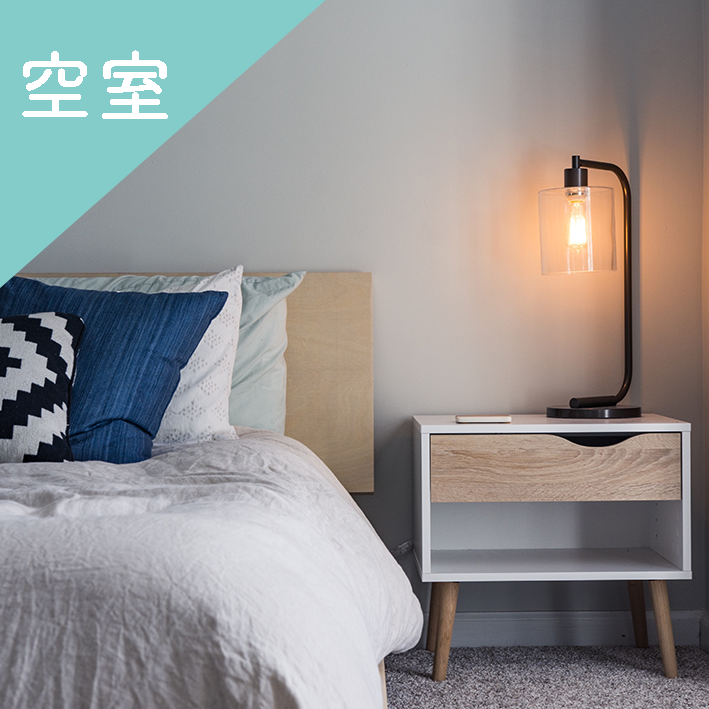
<style>
.page{position:relative;width:709px;height:709px}
.page>*{position:absolute;margin:0}
.t1{font:80px "TsukuARdGothicStd-B";letter-spacing:0.01em;color:#ffffff}
</style>
<div class="page">
<p class="t1" style="left:22px;top:50px;width:146px;height:69px">空室</p>
</div>
